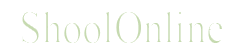
<style>
.page{position:relative;width:242px;height:52px;background:#ffffff}
.page>*{position:absolute;margin:0}
.t1{font:45.7px "TimesNewRomanPSMT";scale:0.89 1}
</style>
<div class="page">
<p class="t1" style="left:21px;top:11px;width:202px;height:33px">ShoolOnline</p>
</div>
